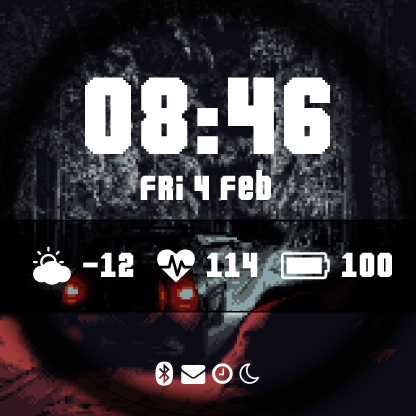
<style>
.page{position:relative;width:416px;height:416px}
.page>*{position:absolute;margin:0}
.t1{font:38px "Pixeldown";color:#ffffff}
.t2{font:120px "Pixeldown";color:#ffffff}
.t3{font:38px "custom_watch";color:#ffffff}
.t4{font:24px "custom_watch";color:#ffffff}
</style>
<div class="page">
<p class="t1" style="left:85px;top:77px;width:246px;height:123px;text-align:center"><span class="t2">08:46<br></span>Fri 4 feb</p>
<p class="t3" style="left:32px;top:246px;width:102px;height:39px">( -12</p>
<p class="t3" style="left:157px;top:249px;width:101px;height:34px">A 114</p>
<p class="t3" style="left:280px;top:252px;width:113px;height:28px">F 100</p>
<p class="t4" style="left:155px;top:361px;width:105px;height:25px">B C D E</p>
</div>
